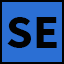
<style>
.page{position:relative;width:64px;height:64px;background:#2b6fd4}
.page>*{position:absolute;margin:0}
.t1{font:48px "SourceSansPro-Bold";color:#020202}
</style>
<div class="page">
<p class="t1" style="left:7px;top:17px;width:50px;height:31px">SE</p>
</div>
